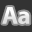
<style>
.page{position:relative;width:32px;height:32px;background:#333333}
.page>*{position:absolute;margin:0}
.t1{font:25px "MyriadPro-Bold";letter-spacing:-0.025em;color:#dcdbdc}
</style>
<div class="page">
<p class="t1" style="left:2px;top:7px;width:28px;height:17px">Aa</p>
</div>
